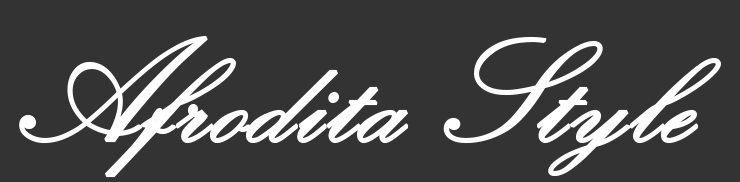
<style>
.page{position:relative;width:740px;height:182px;background:#333333}
.page>*{position:absolute;margin:0}
.t1{font:150px "KunstlerScript";color:#ffffff;font-weight:bold}
</style>
<div class="page">
<p class="t1" style="left:19px;top:35px;width:702px;height:143px">Afrodita Style</p>
</div>
